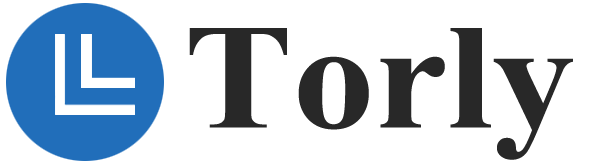
<style>
.page{position:relative;width:591px;height:164px;background:#ffffff}
.page>*{position:absolute;margin:0}
.t1{font:149.7px "David-Bold";color:#282828;scale:1.09 1}
</style>
<div class="page">
<p class="t1" style="left:189px;top:28px;width:384px;height:132px">Torly</p>
</div>
